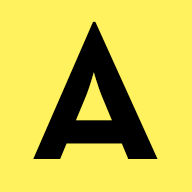
<style>
.page{position:relative;width:192px;height:192px;background:#fff25e}
.page>*{position:absolute;margin:0}
.t1{font:200px "NeutraTextTF-BoldAlt";letter-spacing:0.02em;color:#000000}
</style>
<div class="page">
<p class="t1" style="left:33px;top:21px;width:125px;height:138px">A</p>
</div>
